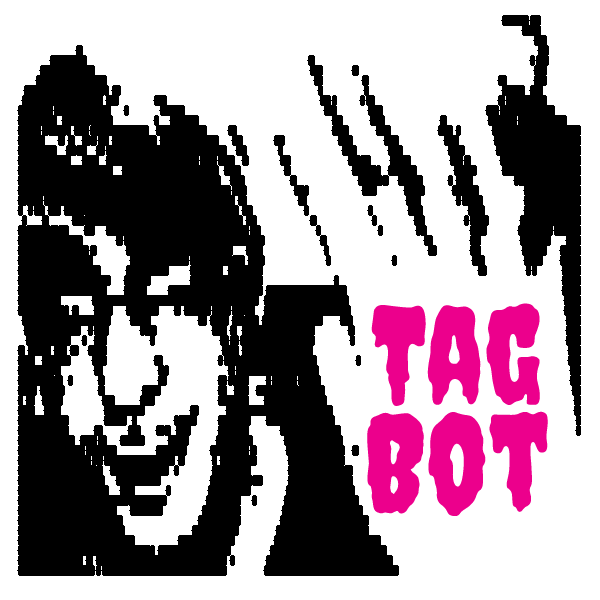
<style>
.page{position:relative;width:600px;height:600px;background:#ffffff}
.page>*{position:absolute;margin:0}
.t1{font:133.3px/106.7px "Creepster-Regular";color:#ec008c}
</style>
<div class="page">
<p class="t1" style="left:367px;top:303px;width:181px;height:213px;text-align:center">Tag<br>Bot</p>
</div>
